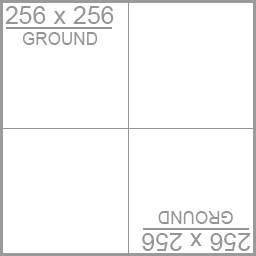
<style>
.page{position:relative;width:256px;height:256px;background:#ffffff}
.page>*{position:absolute;margin:0}
.t1{font:25px "ArialMT";color:#959595}
.t2{font:17.8px "ArialMT";color:#959595;scale:0.96 1}
.t3{font:17.9px "ArialMT";color:#959595;scale:0.96 1}
.t4{font:25.2px "ArialMT";color:#959595}
</style>
<div class="page">
<p class="t1" style="left:5px;top:6px;width:109px;height:18px">256 x 256</p>
<p class="t2" style="left:22px;top:32px;width:76px;height:13px">GROUND</p>
<p class="t3" style="left:158px;top:211px;width:75px;height:13px;rotate:180deg">GROUND</p>
<p class="t4" style="left:142px;top:233px;width:109px;height:18px;rotate:180deg">256 x 256</p>
</div>
